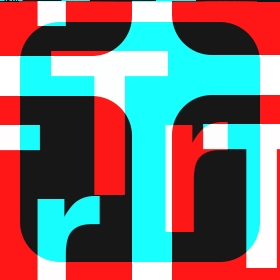
<style>
.page{position:relative;width:280px;height:280px;background:#171717}
.page>*{position:absolute;margin:0}
.t1{font:200px "Helvetica-Bold"}
</style>
<div class="page">
<p class="t1" style="left:51px;top:49px;width:117px;height:144px">T</p>
<p class="t1" style="left:165px;top:120px;width:63px;height:110px">r</p>
</div>
